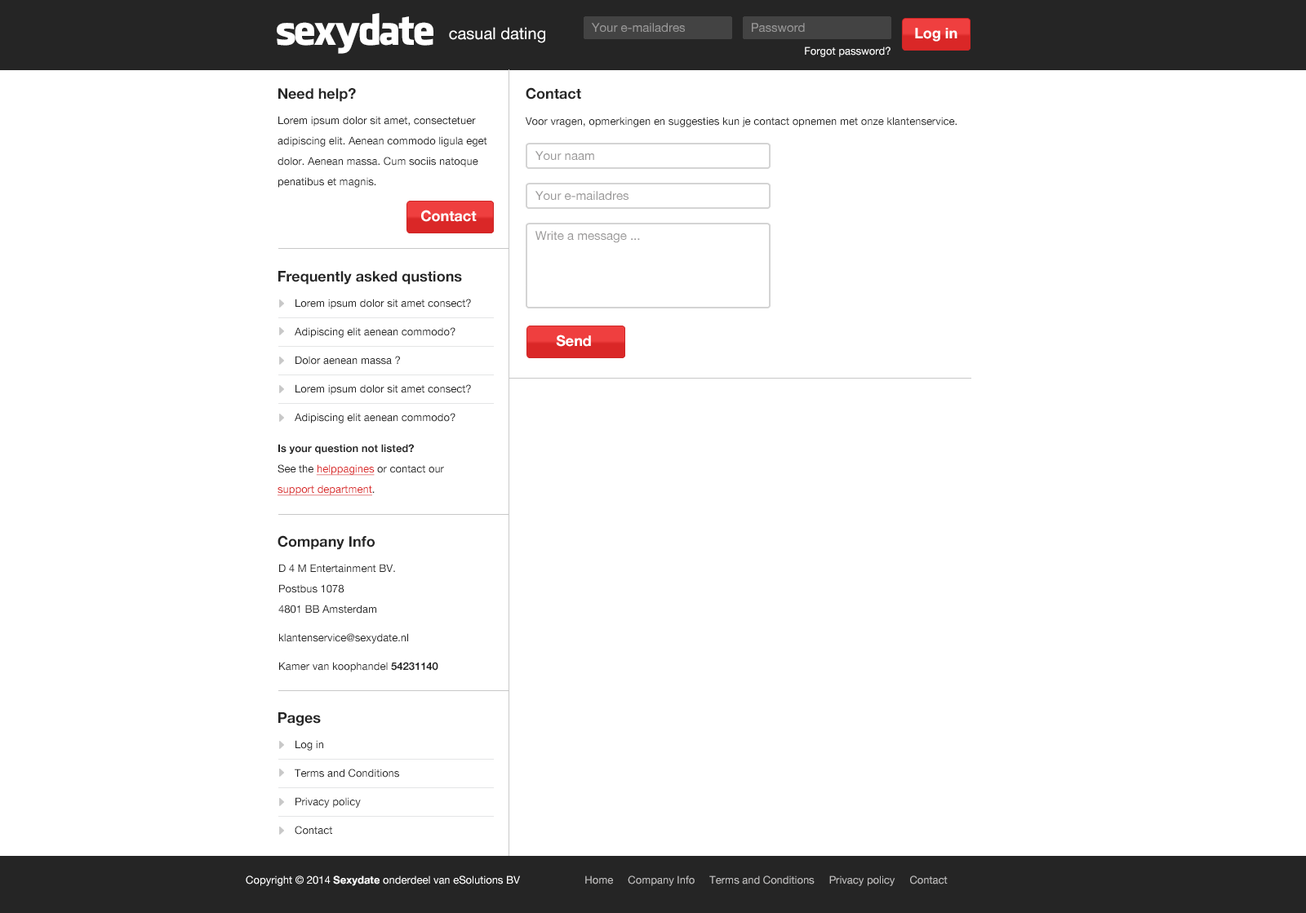
<style>
.page{position:relative;width:1306px;height:913px;background:#ffffff}
.page>*{position:absolute;margin:0}
.t1{font:40.8px "FacebookLetterFaces";letter-spacing:-0.05em;color:#ffffff}
.t2{font:16.3px "HelveticaNeue";color:#ffffff}
.t3{font:12.2px "HelveticaNeue";color:#999898}
.t4{font:14.7px "HelveticaNeue-Bold";color:#ffffff}
.t5{font:10.6px "HelveticaNeue";color:#ffffff}
.t6{font:14.7px "HelveticaNeue-Bold";color:#252525}
.t7{font:10.6px/20.4px "HelveticaNeue";color:#252525}
.t8{font:10.6px "HelveticaNeue";color:#252525}
.t9{font:10.6px/28.6px "HelveticaNeue";color:#252525}
.t10{font:10.6px/20.4px "HelveticaNeue-Bold";color:#252525}
.t11{font:10.6px/20.4px "HelveticaNeue";color:#da2727;text-decoration:underline}
.t12{font:10.6px/28.6px "HelveticaNeue-Bold";color:#252525}
.t13{font:10.6px "HelveticaNeue";color:#c1c0c0}
.t14{font:10.6px "HelveticaNeue-Bold";color:#ffffff}
</style>
<div class="page">
<p class="t1" style="left:277px;top:13px;width:156px;height:41px">sexydate</p>
<p class="t2" style="left:449px;top:27px;width:96px;height:16px">casual dating</p>
<p class="t3" style="left:591px;top:23px;width:94px;height:9px">Your e-mailadres</p>
<p class="t3" style="left:752px;top:23px;width:53px;height:9px">Password</p>
<p class="t4" style="left:915px;top:28px;width:42px;height:14px">Log in</p>
<p class="t5" style="left:805px;top:47px;width:85px;height:10px">Forgot password?</p>
<p class="t6" style="left:278px;top:88px;width:78px;height:14px">Need help?</p>
<p class="t6" style="left:526px;top:87px;width:55px;height:13px">Contact</p>
<p class="t7" style="left:277px;top:116px;width:210px;height:72px">Lorem ipsum dolor sit amet, consectetuer <br>adipiscing elit. Aenean commodo ligula eget <br>dolor. Aenean massa. Cum sociis natoque <br>penatibus et magnis.</p>
<p class="t8" style="left:525px;top:117px;width:431px;height:10px">Voor vragen, opmerkingen en suggesties kun je contact opnemen met onze klantenservice.</p>
<p class="t3" style="left:535px;top:151px;width:59px;height:9px">Your naam</p>
<p class="t3" style="left:535px;top:191px;width:93px;height:9px">Your e-mailadres</p>
<p class="t4" style="left:421px;top:210px;width:56px;height:12px">Contact</p>
<p class="t3" style="left:535px;top:231px;width:105px;height:12px">Write a message ...</p>
<p class="t6" style="left:278px;top:271px;width:184px;height:14px">Frequently asked qustions</p>
<p class="t9" style="left:295px;top:299px;width:176px;height:125px">Lorem ipsum dolor sit amet consect?<br>Adipiscing elit aenean commodo?<br>Dolor aenean massa ?<br>Lorem ipsum dolor sit amet consect?<br>Adipiscing elit aenean commodo?</p>
<p class="t4" style="left:556px;top:335px;width:35px;height:12px">Send</p>
<p class="t10" style="left:277px;top:444px;width:167px;height:52px">Is your question not listed? <br><span class="t7">See the </span><span class="t11">helppagines</span><span class="t7"> or contact our<br></span><span class="t11">support department</span><span class="t7">.</span></p>
<p class="t6" style="left:277px;top:535px;width:98px;height:15px">Company Info</p>
<p class="t7" style="left:278px;top:564px;width:160px;height:108px">D 4 M Entertainment BV.<br>Postbus 1078<br>4801 BB Amsterdam<br><span class="t9">klantenservice@sexydate.nl<br>Kamer van koophandel </span><span class="t12">54231140</span></p>
<p class="t6" style="left:278px;top:712px;width:43px;height:14px">Pages</p>
<p class="t9" style="left:295px;top:740px;width:104px;height:95px">Log in<br>Terms and Conditions<br>Privacy policy<br>Contact</p>
<p class="t13" style="left:246px;top:876px;width:701px;height:10px"><span class="t5">Copyright © 2014 </span><span class="t14">Sexydate</span><span class="t5"> onderdeel van eSolutions BV</span>                      Home     Company Info     Terms and Conditions     Privacy policy     Contact</p>
</div>
